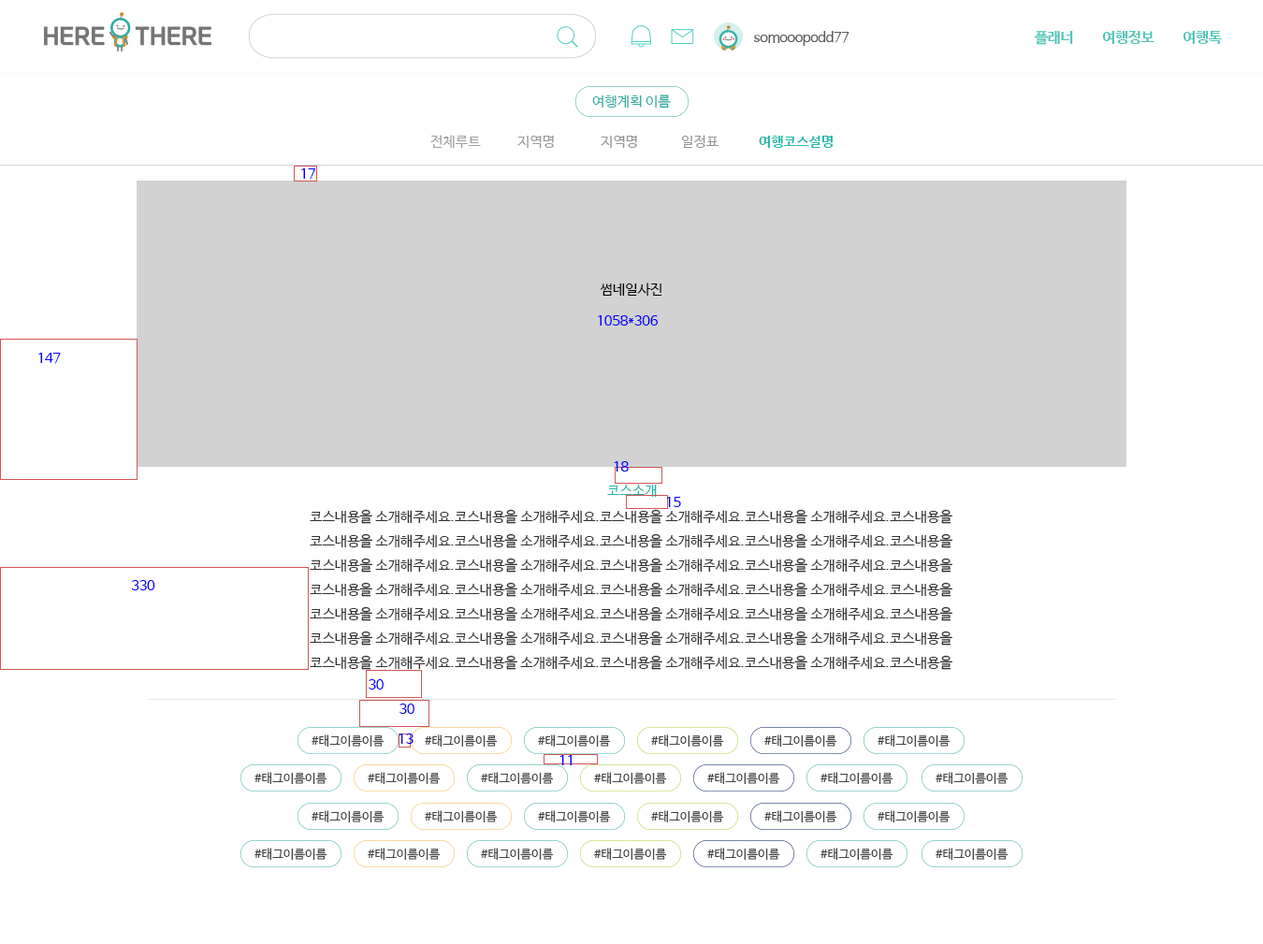
<style>
.page{position:relative;width:1263px;height:944px;background:#ffffff}
.page>*{position:absolute;margin:0}
.t1{font:13.9px "NanumBarunGothic";letter-spacing:-0.025em;color:#58595b}
.t2{font:14.8px "NanumBarunGothicBold";letter-spacing:-0.025em;color:#4bc5b9}
.t3{font:14px "NanumBarunGothic";color:#36ada4}
.t4{font:14px "NanumBarunGothic";color:#a0a0a0}
.t5{font:14px "NanumBarunGothic";color:#999a9a}
.t6{font:14px "NanumBarunGothic";color:#959595}
.t7{font:14px "NanumBarunGothicBold";color:#25b7aa}
.t8{font:13.6px "NanumBarunGothic";color:#0000ff}
.t9{font:14px "NanumBarunGothic";color:#000000}
.t10{font:14px "NanumBarunGothic";color:#25b7aa}
.t11{font:14px/24.3px "NanumBarunGothic";color:#313131}
.t12{font:12.2px "NanumBarunGothic";color:#434343}
</style>
<div class="page">
<p class="t1" style="left:754px;top:31px;width:96px;height:15px">somooopodd77</p>
<p class="t2" style="left:1034px;top:31px;width:39px;height:14px">플래너</p>
<p class="t2" style="left:1102px;top:31px;width:53px;height:13px">여행정보</p>
<p class="t2" style="left:1183px;top:31px;width:39px;height:13px">여행톡</p>
<p class="t3" style="left:592px;top:94px;width:79px;height:15px">여행계획 이름</p>
<p class="t4" style="left:430px;top:135px;width:51px;height:13px">전체루트</p>
<p class="t5" style="left:517px;top:136px;width:37px;height:12px">지역명</p>
<p class="t6" style="left:601px;top:136px;width:36px;height:12px">지역명</p>
<p class="t6" style="left:681px;top:135px;width:38px;height:13px">일정표</p>
<p class="t7" style="left:759px;top:136px;width:75px;height:12px">여행코스설명</p>
<p class="t8" style="left:301px;top:168px;width:14px;height:12px">17</p>
<p class="t9" style="left:600px;top:283px;width:62px;height:13px">썸네일사진</p>
<p class="t8" style="left:598px;top:315px;width:60px;height:11px">1058*306</p>
<p class="t8" style="left:38px;top:353px;width:23px;height:11px">147</p>
<p class="t8" style="left:614px;top:461px;width:15px;height:11px">18</p>
<p class="t10" style="left:607px;top:485px;width:50px;height:12px">코스소개</p>
<p class="t8" style="left:666px;top:497px;width:15px;height:10px">15</p>
<p class="t11" style="left:310px;top:509px;width:642px;height:161px">코스내용을 소개해주세요.코스내용을 소개해주세요.코스내용을 소개해주세요.코스내용을 소개해주세요.코스내용을<br>코스내용을 소개해주세요.코스내용을 소개해주세요.코스내용을 소개해주세요.코스내용을 소개해주세요.코스내용을<br>코스내용을 소개해주세요.코스내용을 소개해주세요.코스내용을 소개해주세요.코스내용을 소개해주세요.코스내용을<br>코스내용을 소개해주세요.코스내용을 소개해주세요.코스내용을 소개해주세요.코스내용을 소개해주세요.코스내용을<br>코스내용을 소개해주세요.코스내용을 소개해주세요.코스내용을 소개해주세요.코스내용을 소개해주세요.코스내용을<br>코스내용을 소개해주세요.코스내용을 소개해주세요.코스내용을 소개해주세요.코스내용을 소개해주세요.코스내용을<br>코스내용을 소개해주세요.코스내용을 소개해주세요.코스내용을 소개해주세요.코스내용을 소개해주세요.코스내용을</p>
<p class="t8" style="left:132px;top:580px;width:23px;height:10px">330</p>
<p class="t8" style="left:369px;top:679px;width:15px;height:11px">30</p>
<p class="t8" style="left:400px;top:704px;width:14px;height:10px">30</p>
<p class="t12" style="left:312px;top:734px;width:73px;height:13px">#태그이름이름</p>
<p class="t8" style="left:399px;top:734px;width:15px;height:10px">13</p>
<p class="t12" style="left:425px;top:734px;width:73px;height:13px">#태그이름이름</p>
<p class="t12" style="left:538px;top:734px;width:73px;height:13px">#태그이름이름</p>
<p class="t12" style="left:651px;top:734px;width:73px;height:13px">#태그이름이름</p>
<p class="t12" style="left:764px;top:734px;width:73px;height:13px">#태그이름이름</p>
<p class="t12" style="left:878px;top:734px;width:73px;height:13px">#태그이름이름</p>
<p class="t8" style="left:560px;top:755px;width:12px;height:10px">11</p>
<p class="t12" style="left:254px;top:772px;width:73px;height:12px">#태그이름이름</p>
<p class="t12" style="left:368px;top:772px;width:73px;height:12px">#태그이름이름</p>
<p class="t12" style="left:481px;top:772px;width:73px;height:12px">#태그이름이름</p>
<p class="t12" style="left:594px;top:772px;width:73px;height:12px">#태그이름이름</p>
<p class="t12" style="left:707px;top:772px;width:73px;height:12px">#태그이름이름</p>
<p class="t12" style="left:821px;top:772px;width:73px;height:12px">#태그이름이름</p>
<p class="t12" style="left:936px;top:772px;width:73px;height:12px">#태그이름이름</p>
<p class="t12" style="left:312px;top:810px;width:73px;height:12px">#태그이름이름</p>
<p class="t12" style="left:425px;top:810px;width:73px;height:12px">#태그이름이름</p>
<p class="t12" style="left:538px;top:810px;width:73px;height:12px">#태그이름이름</p>
<p class="t12" style="left:651px;top:810px;width:73px;height:12px">#태그이름이름</p>
<p class="t12" style="left:764px;top:810px;width:73px;height:12px">#태그이름이름</p>
<p class="t12" style="left:878px;top:810px;width:73px;height:12px">#태그이름이름</p>
<p class="t12" style="left:254px;top:848px;width:73px;height:12px">#태그이름이름</p>
<p class="t12" style="left:368px;top:848px;width:73px;height:12px">#태그이름이름</p>
<p class="t12" style="left:481px;top:848px;width:73px;height:12px">#태그이름이름</p>
<p class="t12" style="left:594px;top:848px;width:73px;height:12px">#태그이름이름</p>
<p class="t12" style="left:707px;top:848px;width:73px;height:12px">#태그이름이름</p>
<p class="t12" style="left:821px;top:848px;width:73px;height:12px">#태그이름이름</p>
<p class="t12" style="left:936px;top:848px;width:73px;height:12px">#태그이름이름</p>
</div>
